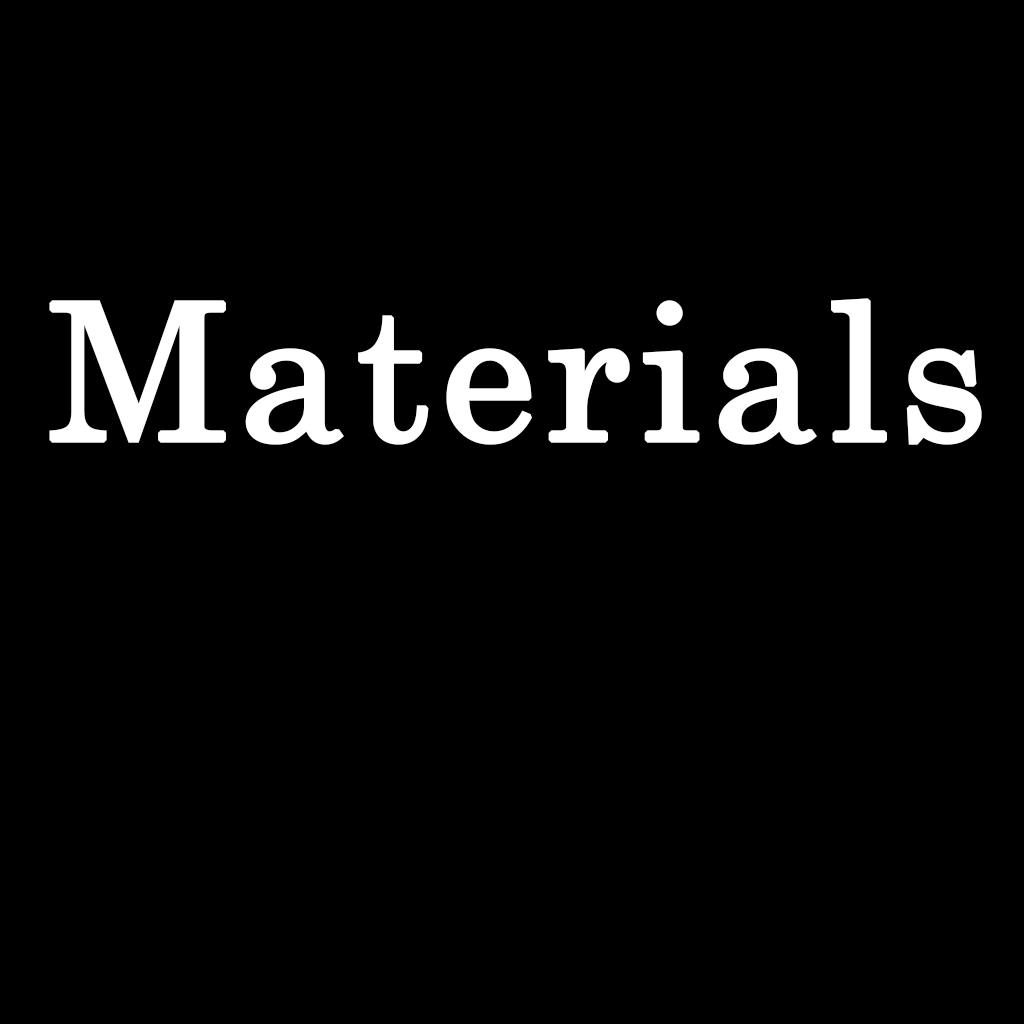
<style>
.page{position:relative;width:1024px;height:1024px;background:#000000}
.page>*{position:absolute;margin:0}
.t1{font:190px "CenturySchoolbook";letter-spacing:0.03em;color:#ffffff;font-weight:bold}
</style>
<div class="page">
<p class="t1" style="left:49px;top:298px;width:933px;height:147px">Materials</p>
</div>
